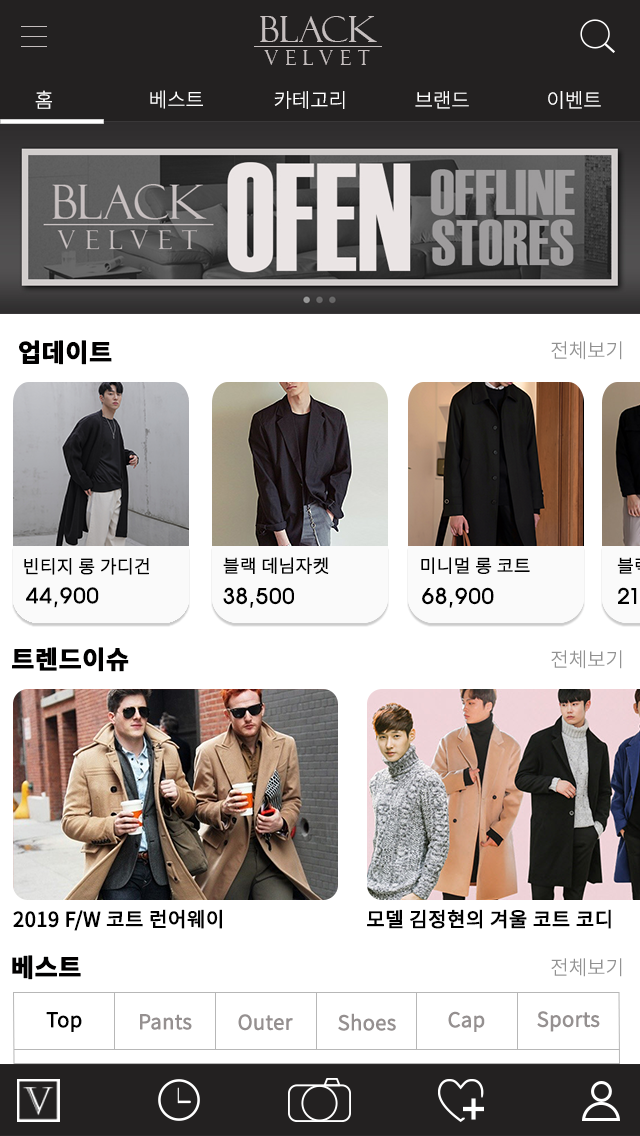
<style>
.page{position:relative;width:640px;height:1136px;background:#ffffff}
.page>*{position:absolute;margin:0}
.t1{font:36.4px "FelixTitlingMT";color:#c5bebe;scale:0.96 1}
.t2{font:19.8px "FelixTitlingMT";letter-spacing:0.4em;color:#c5bebe;scale:0.96 1}
.t3{font:20px "NotoSansCJKkr-Light";color:#ffffff}
.t4{font:25px "NotoSansCJKkr-Bold";color:#010000;font-weight:bold}
.t5{font:20px "NotoSansCJKkr-Light";color:#929292}
.t6{font:18px "NotoSansCJKkr-Light";color:#000000;font-weight:bold}
.t7{font:25px "HYnamB";color:#000000}
.t8{font:20px "NotoSansCJKkr-Regular";color:#000000;font-weight:bold}
.t9{font:20px "NotoSansCJKkr-DemiLight";color:#000000;font-weight:bold}
.t10{font:20px "NotoSansCJKkr-DemiLight";color:#959090;font-weight:bold}
</style>
<div class="page">
<p class="t1" style="left:260px;top:16px;width:117px;height:26px">BLACK</p>
<p class="t2" style="left:264px;top:50px;width:106px;height:15px">VELVET</p>
<p class="t3" style="left:35px;top:90px;width:17px;height:19px">홈</p>
<p class="t3" style="left:150px;top:90px;width:53px;height:19px">베스트</p>
<p class="t3" style="left:274px;top:91px;width:71px;height:18px">카테고리</p>
<p class="t3" style="left:415px;top:91px;width:54px;height:18px">브랜드</p>
<p class="t3" style="left:548px;top:91px;width:53px;height:18px">이벤트</p>
<p class="t4" style="left:19px;top:340px;width:93px;height:25px">업데이트</p>
<p class="t5" style="left:551px;top:341px;width:71px;height:19px">전체보기</p>
<p class="t6" style="left:24px;top:558px;width:125px;height:17px">빈티지 롱 가디건</p>
<p class="t6" style="left:223px;top:557px;width:106px;height:17px">블랙 데님자켓</p>
<p class="t6" style="left:421px;top:557px;width:109px;height:17px">미니멀 롱 코트</p>
<p class="t7" style="left:26px;top:587px;width:73px;height:21px">44,900</p>
<p class="t7" style="left:223px;top:587px;width:71px;height:21px">38,500</p>
<p class="t7" style="left:422px;top:587px;width:72px;height:21px">68,900</p>
<p class="t4" style="left:12px;top:647px;width:117px;height:25px">트렌드이슈</p>
<p class="t5" style="left:551px;top:650px;width:71px;height:19px">전체보기</p>
<p class="t8" style="left:13px;top:909px;width:209px;height:22px">2019 F/W 코트 런어웨이</p>
<p class="t8" style="left:367px;top:909px;width:244px;height:20px">모델 김정현의 겨울 코트 코디</p>
<p class="t4" style="left:12px;top:955px;width:69px;height:25px">베스트</p>
<p class="t5" style="left:551px;top:958px;width:71px;height:19px">전체보기</p>
<p class="t9" style="left:46px;top:1012px;width:36px;height:20px">Top</p>
<p class="t10" style="left:140px;top:1014px;width:52px;height:16px">Pants</p>
<p class="t10" style="left:238px;top:1014px;width:55px;height:17px">Outer</p>
<p class="t10" style="left:338px;top:1013px;width:58px;height:18px">Shoes</p>
<p class="t10" style="left:448px;top:1011px;width:37px;height:21px">Cap</p>
<p class="t10" style="left:537px;top:1011px;width:63px;height:21px">Sports</p>
</div>
